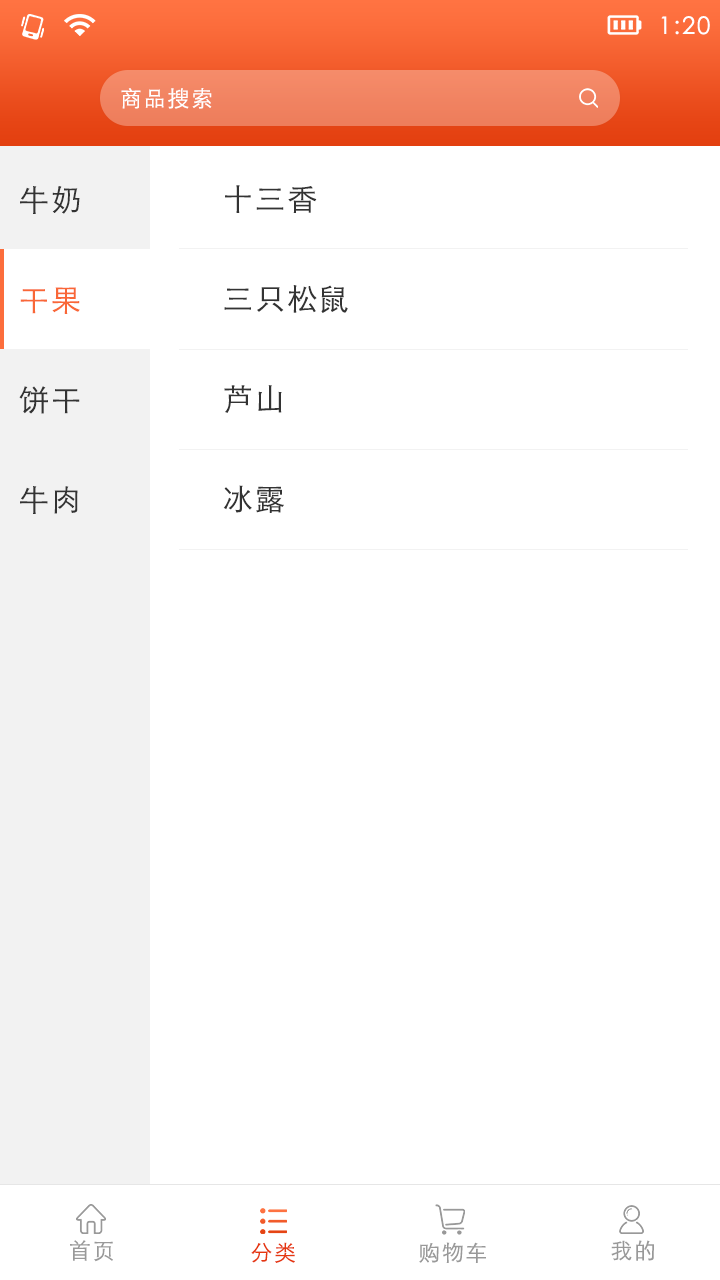
<style>
.page{position:relative;width:720px;height:1280px;background:#ffffff}
.page>*{position:absolute;margin:0}
.t1{font:24px "STXihei";letter-spacing:0.075em;color:#ffffff}
.t2{font:22px "STHeitiSC-Light";letter-spacing:0.075em;color:#ffffff}
.t3{font:30px/100px "STHeitiSC-Light";letter-spacing:0.075em;color:#333333}
.t4{font:30px/100px "STHeitiSC-Light";letter-spacing:0.075em;color:#f96737}
.t5{font:22px "STHeitiSC-Light";letter-spacing:0.075em;color:#999999}
.t6{font:22px "STHeitiSC-Light";letter-spacing:0.075em;color:#e5370f}
</style>
<div class="page">
<p class="t1" style="left:661px;top:16px;width:49px;height:19px">1:20</p>
<p class="t2" style="left:121px;top:88px;width:91px;height:21px">商品搜索</p>
<p class="t3" style="left:223px;top:185px;width:125px;height:328px">十三香<br>三只松鼠<br>芦山<br>冰露</p>
<p class="t3" style="left:19px;top:186px;width:61px;height:328px">牛奶<br><span class="t4">干果<br></span>饼干<br>牛肉</p>
<p class="t5" style="left:70px;top:1240px;width:43px;height:22px">首页</p>
<p class="t5" style="left:611px;top:1240px;width:43px;height:21px">我的</p>
<p class="t6" style="left:251px;top:1242px;width:44px;height:21px">分类</p>
<p class="t5" style="left:419px;top:1242px;width:67px;height:21px">购物车</p>
</div>
